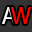
<style>
.page{position:relative;width:32px;height:32px;background:#333333}
.page>*{position:absolute;margin:0}
.t1{font:24px "MyriadPro-Regular"}
.t2{font:24px "MyriadPro-Regular";color:#ff0000}
</style>
<div class="page">
<p class="t1" style="left:2px;top:7px;width:14px;height:17px">A</p>
<p class="t2" style="left:11px;top:7px;width:20px;height:17px">W</p>
</div>
